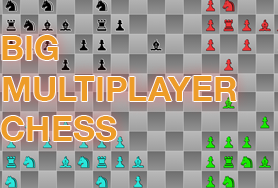
<style>
.page{position:relative;width:278px;height:188px}
.page>*{position:absolute;margin:0}
.t1{font:34px "HelveticaNeue-Bold";color:#ed9c28}
</style>
<div class="page">
<p class="t1" style="left:1px;top:35px;width:236px;height:106px">BIG <br>MULTIPLAYER<br>CHESS</p>
</div>
